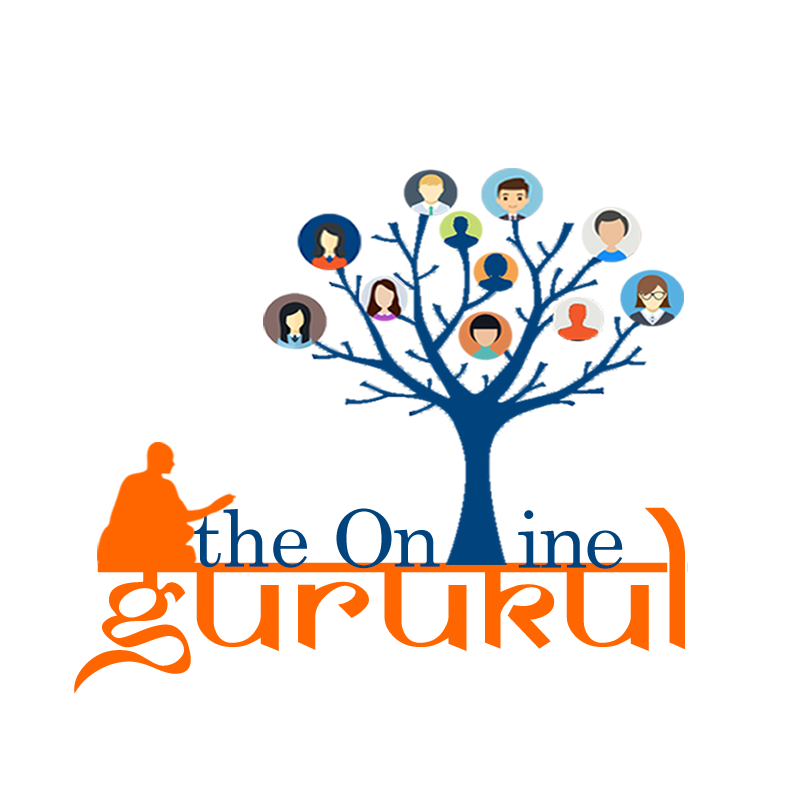
<style>
.page{position:relative;width:800px;height:800px;background:#ffffff}
.page>*{position:absolute;margin:0}
.t1{font:158.2px "SamarkanNormal";letter-spacing:0.01em;color:#ff6600;scale:1.14 1}
.t2{font:79.1px "CenturySchoolbook";letter-spacing:-0.01em;color:#01437d}
.t3{font:79.1px "CenturySchoolbook";letter-spacing:-0.05em;color:#01437d;scale:1.04 1}
</style>
<div class="page">
<p class="t1" style="left:74px;top:507px;width:624px;height:187px">gurukul</p>
<p class="t2" style="left:193px;top:509px;width:114px;height:59px">the</p>
<p class="t3" style="left:336px;top:508px;width:104px;height:61px">On</p>
<p class="t3" style="left:518px;top:510px;width:105px;height:59px">ine</p>
</div>
